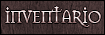
<style>
.page{position:relative;width:105px;height:35px}
.page>*{position:absolute;margin:0}
.t1{font:20.4px "Mason-Regular";letter-spacing:-0.07em;scale:0.81 1}
</style>
<div class="page">
<p class="t1" style="left:5px;top:6px;width:96px;height:21px">INVENTARIO</p>
</div>
